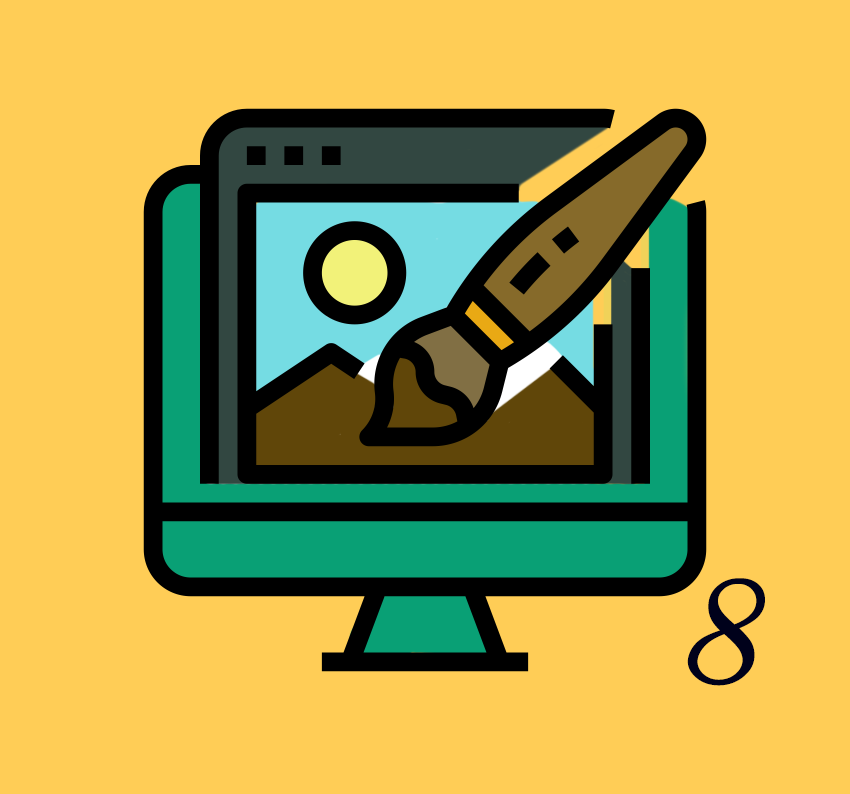
<style>
.page{position:relative;width:850px;height:794px;background:#ffcd56}
.page>*{position:absolute;margin:0}
.t1{font:152.1px "CenturySchoolbook-Italic";color:#00011b}
</style>
<div class="page">
<p class="t1" style="left:687px;top:578px;width:78px;height:108px">8</p>
</div>
